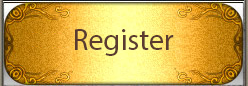
<style>
.page{position:relative;width:248px;height:86px}
.page>*{position:absolute;margin:0}
.t1{font:30px "MyriadPro-Regular";color:#5b3b30}
</style>
<div class="page">
<p class="t1" style="left:75px;top:29px;width:99px;height:27px">Register</p>
</div>
